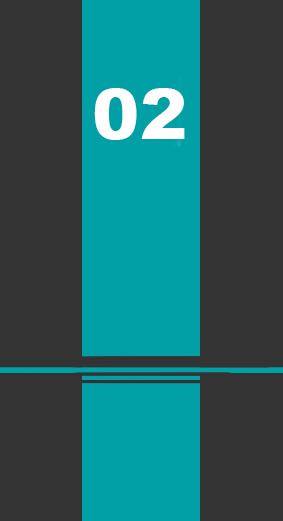
<style>
.page{position:relative;width:283px;height:521px;background:#333333}
.page>*{position:absolute;margin:0}
.t1{font:70px "Arial-Black";color:#ffffff}
</style>
<div class="page">
<p class="t1" style="left:94px;top:88px;width:91px;height:52px">02</p>
</div>
